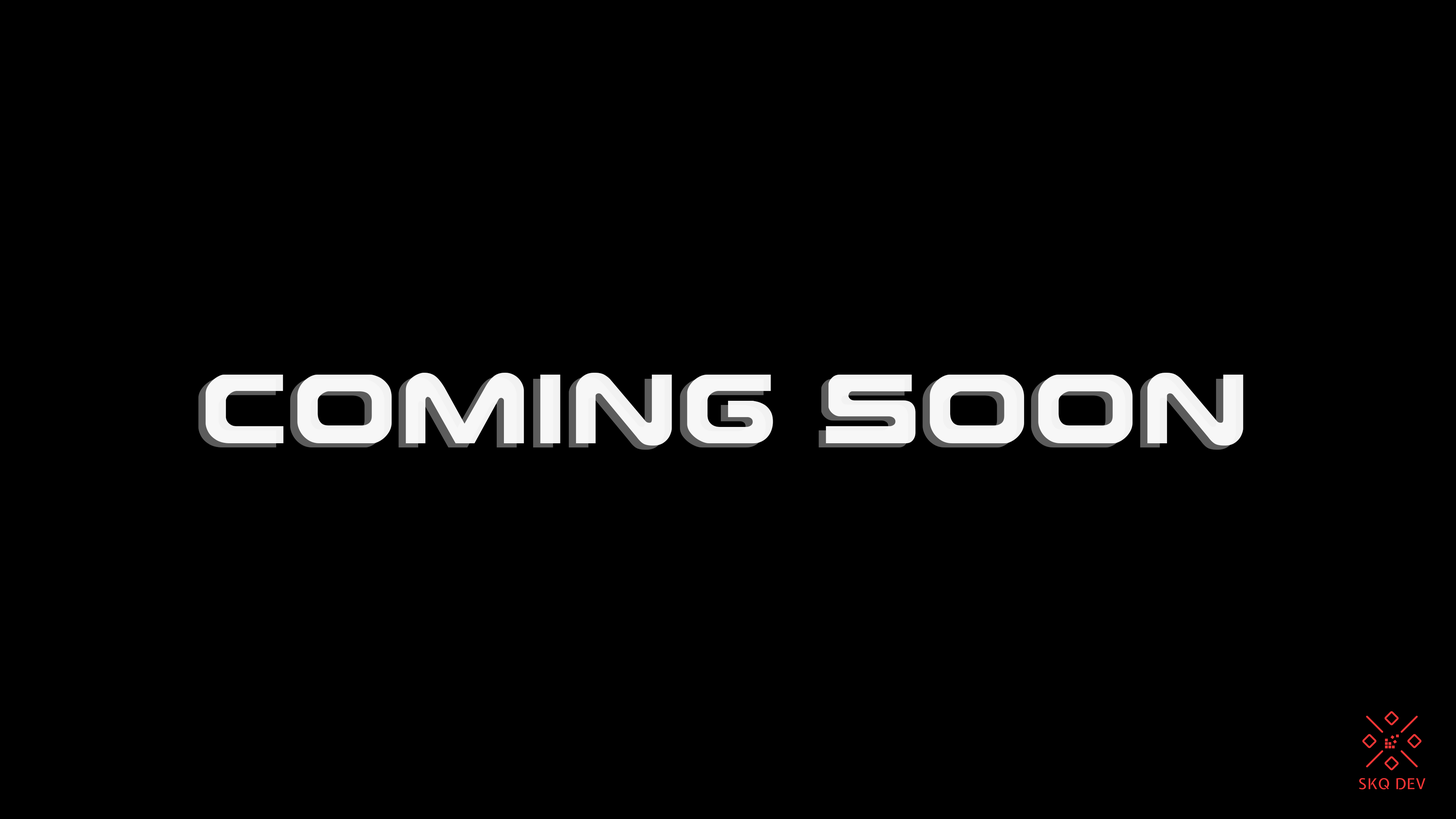
<style>
.page{position:relative;width:1456px;height:819px;background:#000000}
.page>*{position:absolute;margin:0}
.t1{font:98.5px "EarthNormal";letter-spacing:0.05em}
.t2{font:98.5px "EarthNormal";letter-spacing:0.05em;color:#ffffff}
.t3{font:98.5px "EarthNormal";letter-spacing:0.05em;color:#f7f7f7}
</style>
<div class="page">
<p class="t1" style="left:198px;top:377px;width:568px;height:73px">COMING</p>
<p class="t2" style="left:206px;top:373px;width:567px;height:73px">COMING</p>
<p class="t3" style="left:819px;top:377px;width:417px;height:73px">SOON</p>
<p class="t2" style="left:826px;top:373px;width:417px;height:73px">SOON</p>
</div>
